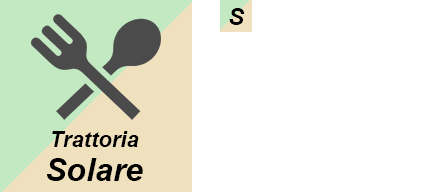
<style>
.page{position:relative;width:432px;height:192px;background:#ffffff}
.page>*{position:absolute;margin:0}
.t1{font:24px "Arial-BoldItalicMT";color:#000000}
.t2{font:22px/26px "Arial-BoldItalicMT";color:#000000}
.t3{font:32px/26px "Arial-BoldItalicMT";color:#000000}
</style>
<div class="page">
<p class="t1" style="left:229px;top:8px;width:16px;height:17px">S</p>
<p class="t2" style="left:47px;top:131px;width:96px;height:50px;text-align:center">Trattoria<br><span class="t3">Solare</span></p>
</div>
